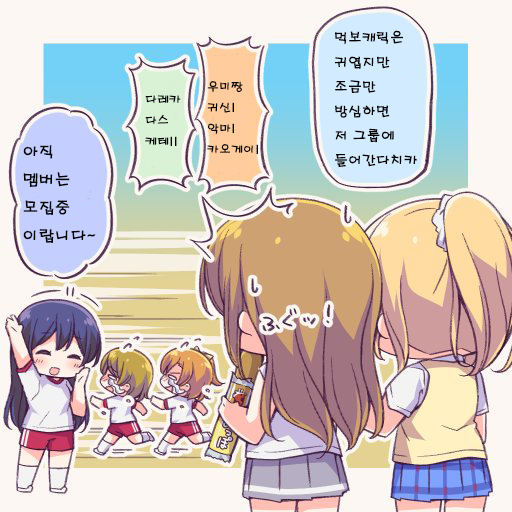
<style>
.page{position:relative;width:512px;height:512px}
.page>*{position:absolute;margin:0}
.t1{font:14px "H2porM";color:#030000}
.t2{font:12px "H2porM";color:#020202}
.t3{font:12px "H2porM";color:#060606}
.t4{font:16px "H2porM";color:#030303}
</style>
<div class="page">
<p class="t1" style="left:335px;top:30px;width:83px;height:137px">먹보캐릭은<br>귀엽지만<br>조금만 방심하면<br>저 그룹에 <br>들어간다치카</p>
<p class="t2" style="left:207px;top:81px;width:51px;height:73px">우미짱<br>귀신!<br>악마!<br>카오게이!</p>
<p class="t3" style="left:145px;top:95px;width:36px;height:51px">다레카<br>다스<br>케테!!</p>
<p class="t4" style="left:23px;top:145px;width:73px;height:98px">아직<br>멤버는<br>모집중<br>이랍니다~</p>
</div>
